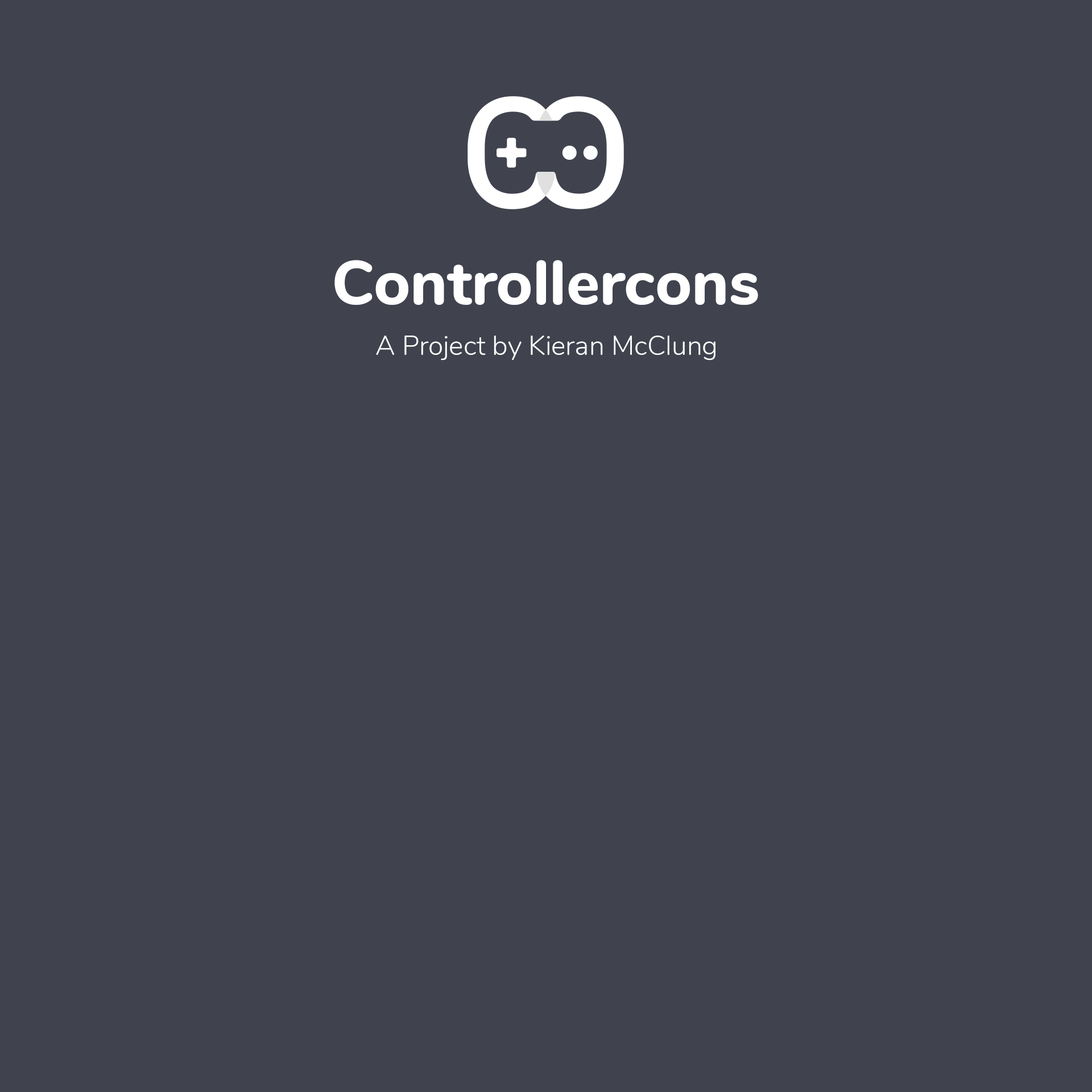
<style>
.page{position:relative;width:1092px;height:1092px;background:#40434e}
.page>*{position:absolute;margin:0}
.t1{font:62.6px "Nunito-ExtraBold";color:#ffffff}
.t2{font:27.3px "Nunito-Light";color:#ffffff}
</style>
<div class="page">
<p class="t1" style="left:334px;top:260px;width:424px;height:45px">Controllercons</p>
<p class="t2" style="left:376px;top:336px;width:339px;height:24px">A Project by Kieran McClung</p>
</div>
